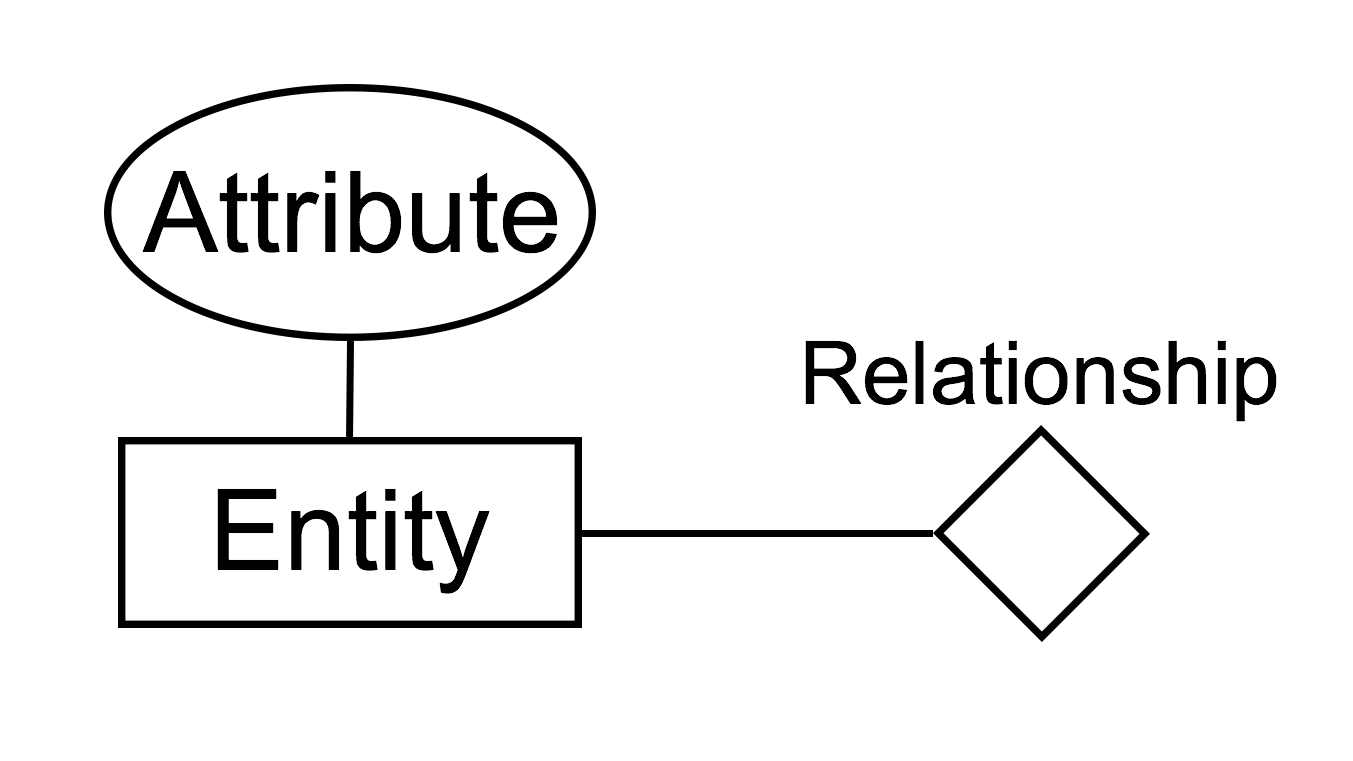
<style>
.page{position:relative;width:1353px;height:761px;background:#ffffff}
.page>*{position:absolute;margin:0}
.t1{font:112.5px "ArialMT";color:#000000}
.t2{font:87.5px "ArialMT";color:#000000}
</style>
<div class="page">
<p class="t1" style="left:142px;top:170px;width:416px;height:84px">Attribute</p>
<p class="t2" style="left:805px;top:340px;width:472px;height:82px">Relationship</p>
<p class="t1" style="left:217px;top:488px;width:273px;height:106px">Entity</p>
</div>
